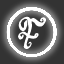
<style>
.page{position:relative;width:64px;height:64px;background:#333333}
.page>*{position:absolute;margin:0}
.t1{font:44.4px "WineTasting";color:#ffffff}
</style>
<div class="page">
<p class="t1" style="left:18px;top:16px;width:28px;height:33px">F</p>
</div>
